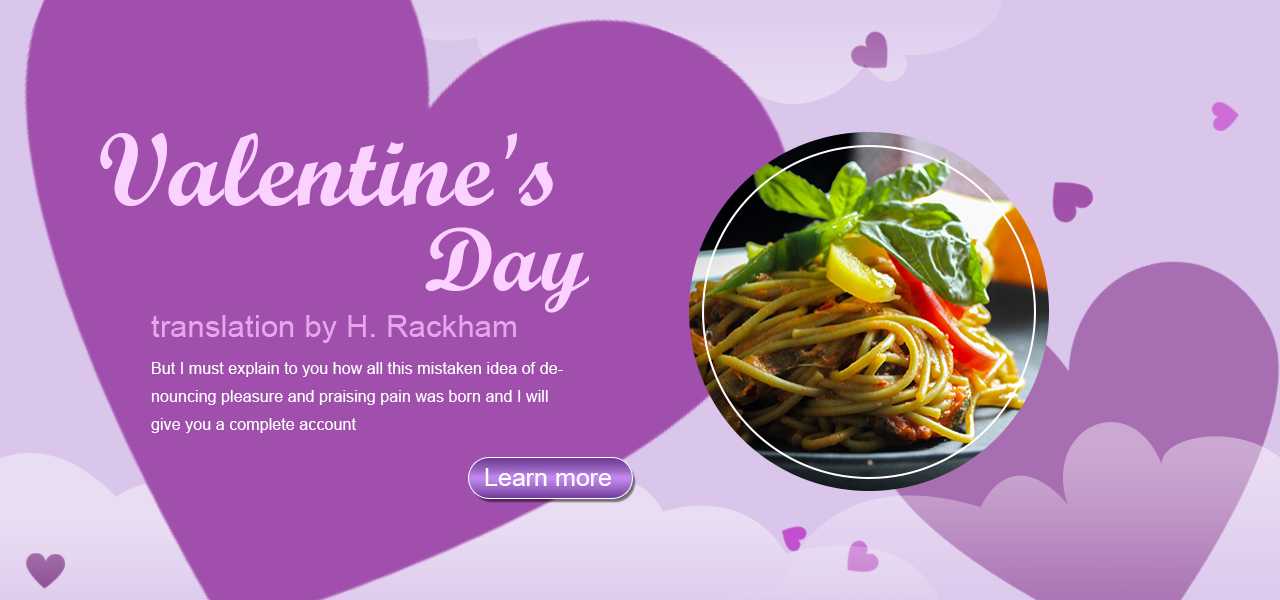
<style>
.page{position:relative;width:1280px;height:600px;background:#a14fac}
.page>*{position:absolute;margin:0}
.t1{font:104.5px/85px "ScriptMTBold";letter-spacing:0.005em;color:#fbd1ff}
.t2{font:90px/85px "ScriptMTBold";letter-spacing:0.005em;color:#fbd1ff}
.t3{font:31.3px "ArialMT";letter-spacing:0.005em;color:#e6a6ec}
.t4{font:16px/28px "ArialMT";letter-spacing:0.005em;color:#ffffff}
.t5{font:24.5px "ArialMT";letter-spacing:0.005em;color:#ffffff}
</style>
<div class="page">
<p class="t1" style="left:100px;top:133px;width:489px;height:180px;text-align:right">Valentine's <br><span class="t2">Day</span></p>
<p class="t3" style="left:151px;top:315px;width:365px;height:28px">translation by H. Rackham</p>
<p class="t4" style="left:151px;top:362px;width:412px;height:71px">But I must explain to you how all this mistaken idea of denouncing pleasure and praising pain was born and I will give you a complete account</p>
<p class="t5" style="left:485px;top:468px;width:126px;height:18px">Learn more</p>
</div>
